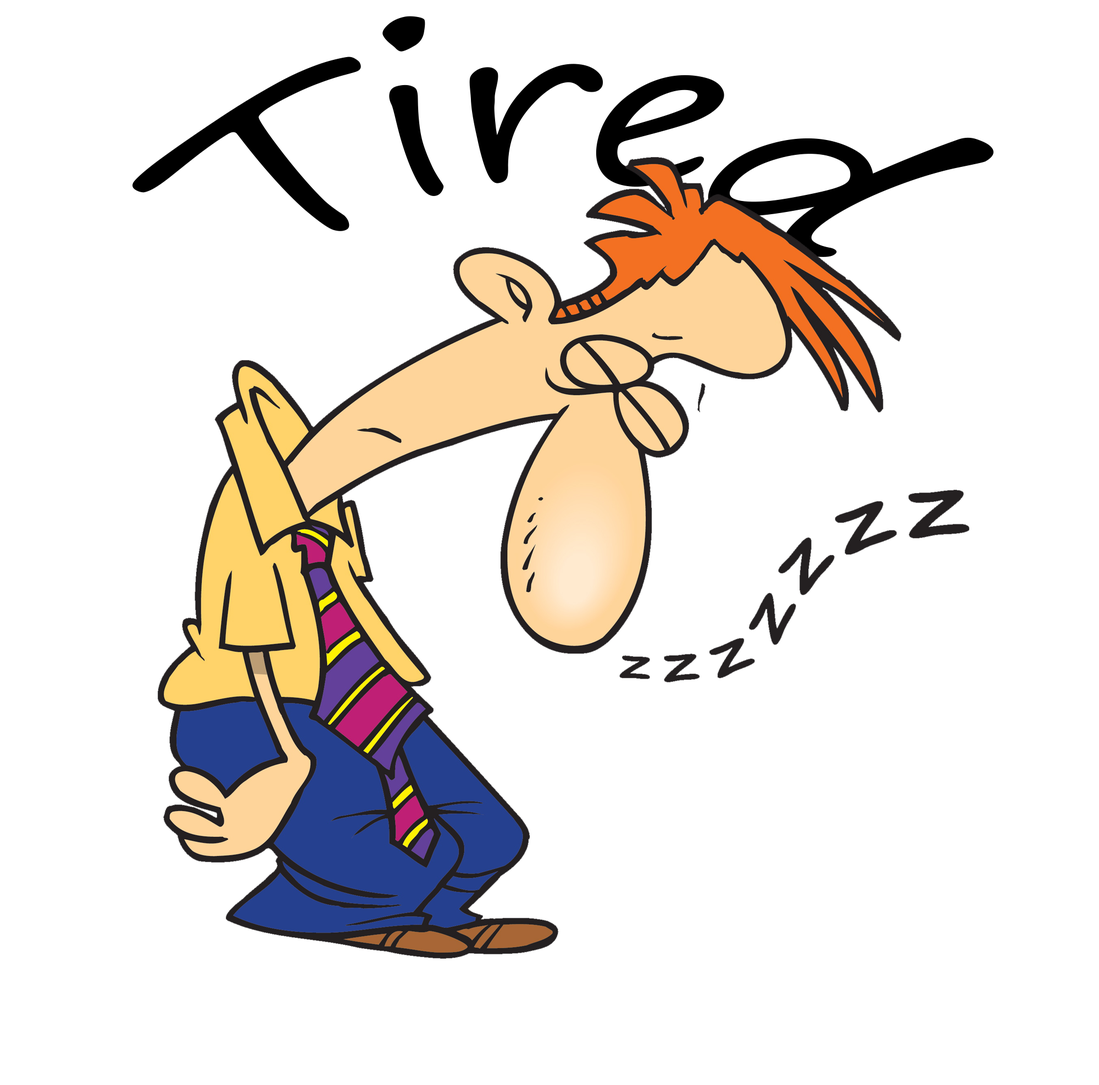
<style>
.page{position:relative;width:1099px;height:1085px;background:#ffffff}
.page>*{position:absolute;margin:0}
.t1{font:164.8px "SegoePrint";color:#000000}
</style>
<div class="page">
<p class="t1" style="left:132px;top:16px;width:861px;height:241px">Tired</p>
</div>
